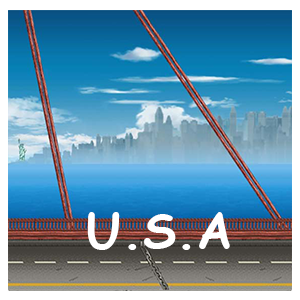
<style>
.page{position:relative;width:300px;height:300px}
.page>*{position:absolute;margin:0}
.t1{font:48px "ComicSansMS-Bold";color:#ffffff}
</style>
<div class="page">
<p class="t1" style="left:87px;top:212px;width:143px;height:38px">U.S.A</p>
</div>
